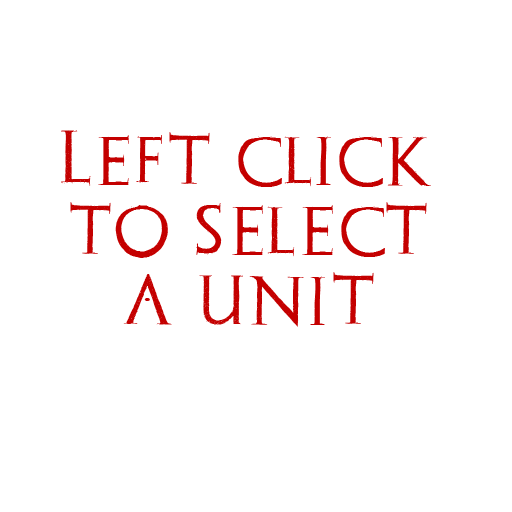
<style>
.page{position:relative;width:512px;height:512px;background:#ffffff}
.page>*{position:absolute;margin:0}
.t1{font:58.3px "Archeologicaps";color:#c40000}
</style>
<div class="page">
<p class="t1" style="left:61px;top:130px;width:370px;height:197px;text-align:center">Left click<br>to select<br>a unit</p>
</div>
